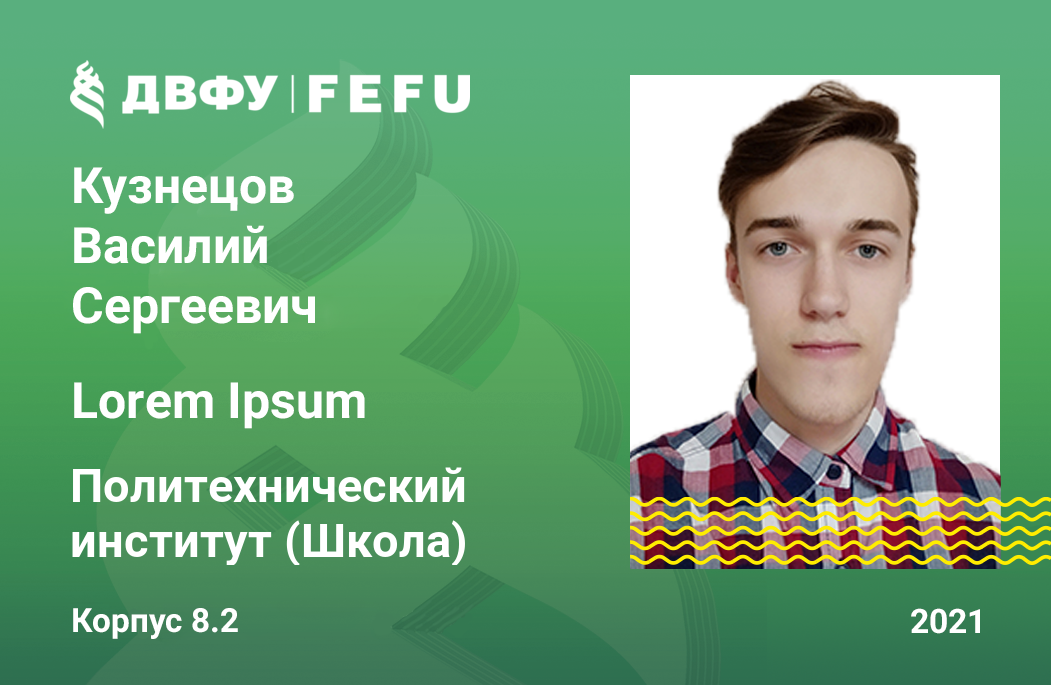
<style>
.page{position:relative;width:1051px;height:685px}
.page>*{position:absolute;margin:0}
.t1{font:50px "Roboto-Bold";color:#ffffff}
.t2{font:33.3px "Roboto-Bold";color:#ffffff}
.t3{font:33.6px "Roboto-Bold";color:#ffffff}
</style>
<div class="page">
<p class="t1" style="left:73px;top:167px;width:242px;height:167px">Кузнецов<br>Василий<br>Сергеевич</p>
<p class="t1" style="left:74px;top:382px;width:291px;height:47px">Lorem Ipsum</p>
<p class="t2" style="left:73px;top:608px;width:165px;height:31px">Корпус 8.2</p>
<p class="t3" style="left:911px;top:608px;width:69px;height:26px">2021</p>
</div>
